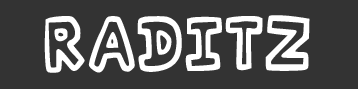
<style>
.page{position:relative;width:358px;height:89px;background:#333333}
.page>*{position:absolute;margin:0}
.t1{font:60px "FridayNightFunkin-Regular";color:#ffffff}
</style>
<div class="page">
<p class="t1" style="left:44px;top:15px;width:266px;height:58px">RADITZ</p>
</div>
